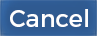
<style>
.page{position:relative;width:97px;height:36px;background:#2f5a90}
.page>*{position:absolute;margin:0}
.t1{font:24px "Montserrat-Regular";color:#ffffff}
</style>
<div class="page">
<p class="t1" style="left:10px;top:9px;width:78px;height:18px">Cancel</p>
</div>
